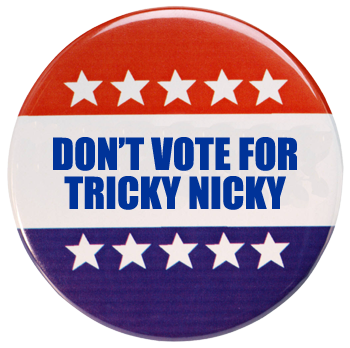
<style>
.page{position:relative;width:350px;height:348px;background:#ffffff}
.page>*{position:absolute;margin:0}
.t1{font:40.8px "Impact";color:#003399}
</style>
<div class="page">
<p class="t1" style="left:53px;top:137px;width:244px;height:73px;text-align:center">DON’T VOTE FOR<br>TRICKY NICKY</p>
</div>
